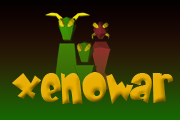
<style>
.page{position:relative;width:180px;height:120px}
.page>*{position:absolute;margin:0}
.t1{font:36px "BabyKruffy";letter-spacing:0.05em;color:#e8ae02}
</style>
<div class="page">
<p class="t1" style="left:12px;top:72px;width:161px;height:32px">XenoWar</p>
</div>
